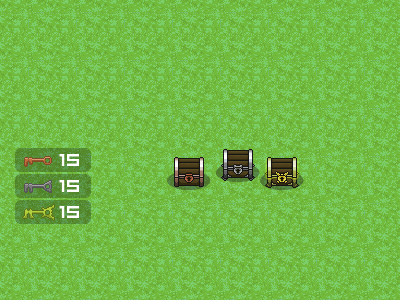
<style>
.page{position:relative;width:400px;height:300px;background:#72ba3b}
.page>*{position:absolute;margin:0}
.t1{font:24px "VisitorTT1BRK";color:#ffffff}
</style>
<div class="page">
<p class="t1" style="left:59px;top:154px;width:20px;height:12px">15</p>
<p class="t1" style="left:59px;top:180px;width:20px;height:12px">15</p>
<p class="t1" style="left:59px;top:206px;width:20px;height:12px">15</p>
</div>
